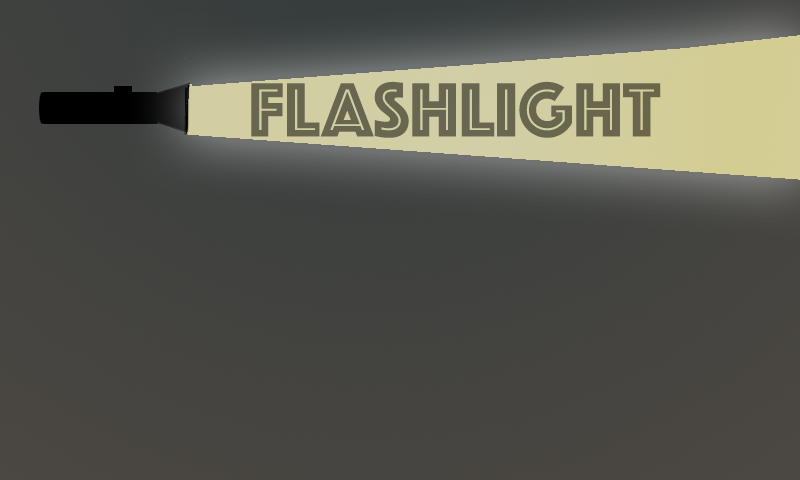
<style>
.page{position:relative;width:800px;height:480px}
.page>*{position:absolute;margin:0}
.t1{font:80px "Phosphate-Inline";color:#696650}
</style>
<div class="page">
<p class="t1" style="left:251px;top:81px;width:410px;height:57px">FLASHLIGHT</p>
</div>
